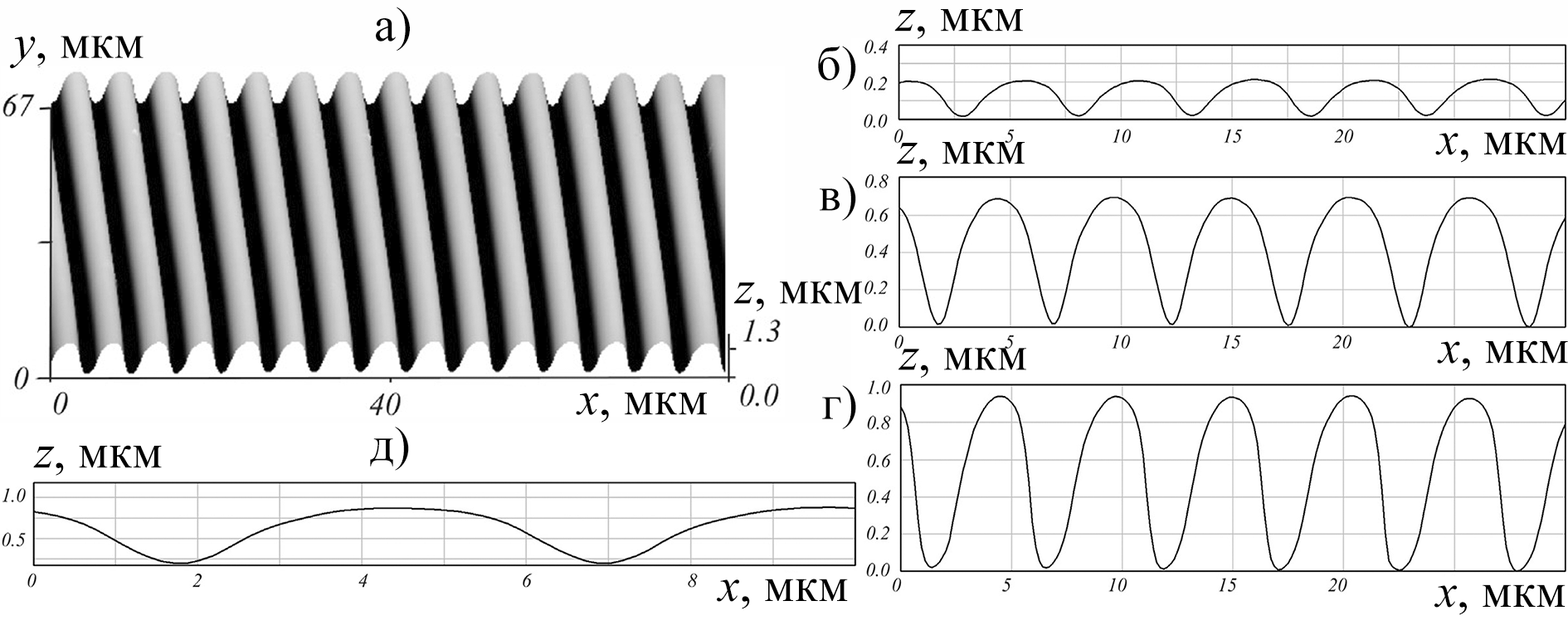
<style>
.page{position:relative;width:1568px;height:640px;background:#ffffff}
.page>*{position:absolute;margin:0}
.t1{font:48.4px "TimesNewRomanPSMT";color:#000000}
.t2{font:48.4px "TimesNewRomanPS-ItalicMT";color:#000000}
</style>
<div class="page">
<p class="t1" style="left:376px;top:7px;width:34px;height:44px">а)</p>
<p class="t1" style="left:894px;top:8px;width:129px;height:31px"><span class="t2">z</span>, мкм</p>
<p class="t1" style="left:10px;top:36px;width:134px;height:33px"><span class="t2">y</span>, мкм</p>
<p class="t1" style="left:818px;top:46px;width:38px;height:44px">б)</p>
<p class="t1" style="left:1435px;top:132px;width:131px;height:31px"><span class="t2">x</span>, мкм</p>
<p class="t1" style="left:897px;top:141px;width:128px;height:31px"><span class="t2">z</span>, мкм</p>
<p class="t1" style="left:820px;top:177px;width:36px;height:44px">в)</p>
<p class="t1" style="left:733px;top:281px;width:129px;height:30px"><span class="t2">z</span>, мкм</p>
<p class="t1" style="left:1437px;top:340px;width:131px;height:31px"><span class="t2">x</span>, мкм</p>
<p class="t1" style="left:898px;top:348px;width:128px;height:29px"><span class="t2">z</span>, мкм</p>
<p class="t1" style="left:822px;top:385px;width:34px;height:44px">г)</p>
<p class="t1" style="left:576px;top:392px;width:131px;height:30px"><span class="t2">x</span>, мкм</p>
<p class="t1" style="left:370px;top:426px;width:39px;height:44px">д)</p>
<p class="t1" style="left:33px;top:445px;width:129px;height:30px"><span class="t2">z</span>, мкм</p>
<p class="t1" style="left:717px;top:578px;width:131px;height:31px"><span class="t2">x</span>, мкм</p>
<p class="t1" style="left:1434px;top:584px;width:132px;height:31px"><span class="t2">x</span>, мкм</p>
</div>
